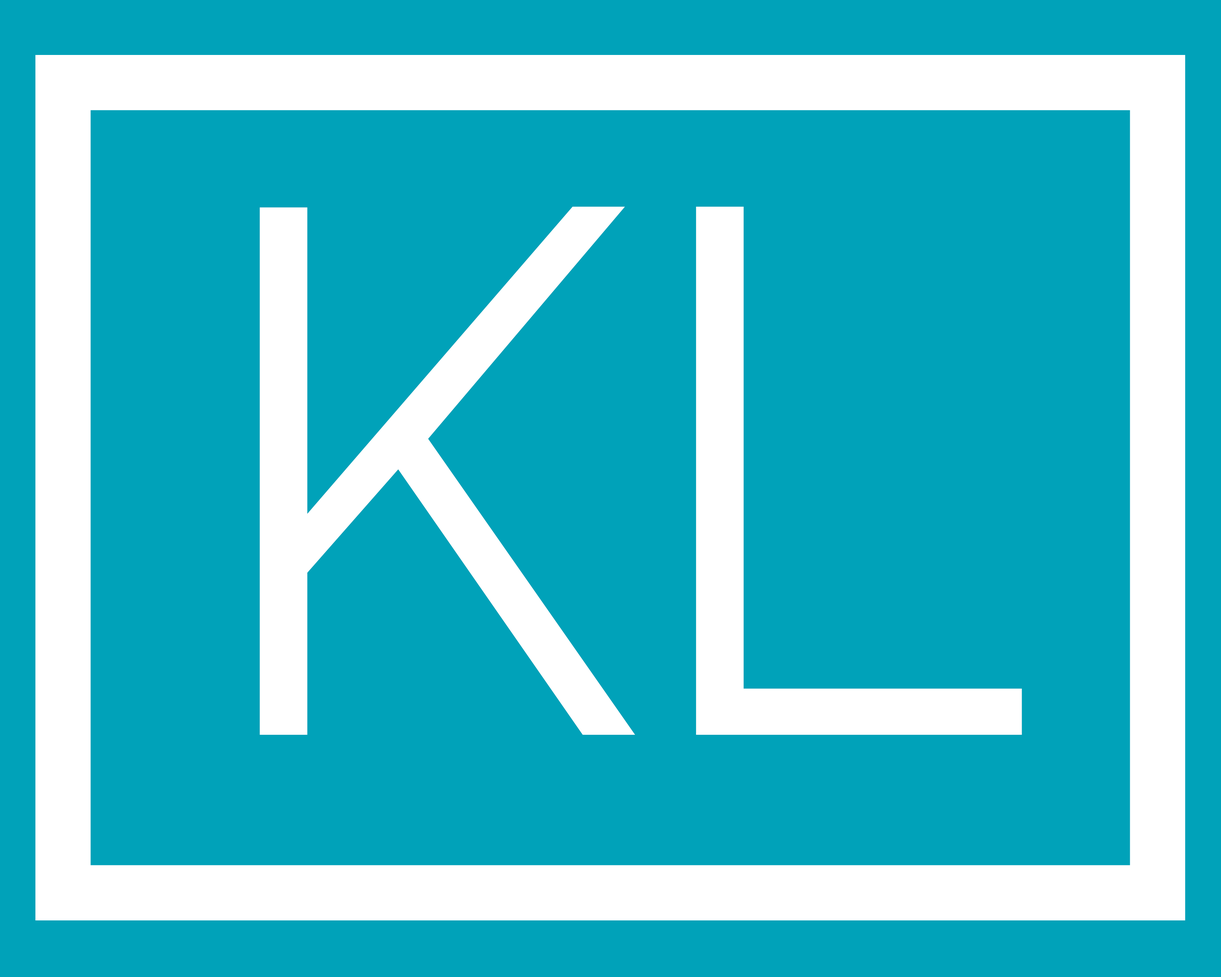
<style>
.page{position:relative;width:1221px;height:977px;background:#00a2b9}
.page>*{position:absolute;margin:0}
.t1{font:743.5px "Raleway-Regular";color:#ffffff;scale:0.91 1}
</style>
<div class="page">
<p class="t1" style="left:260px;top:206px;width:762px;height:529px">KL</p>
</div>
